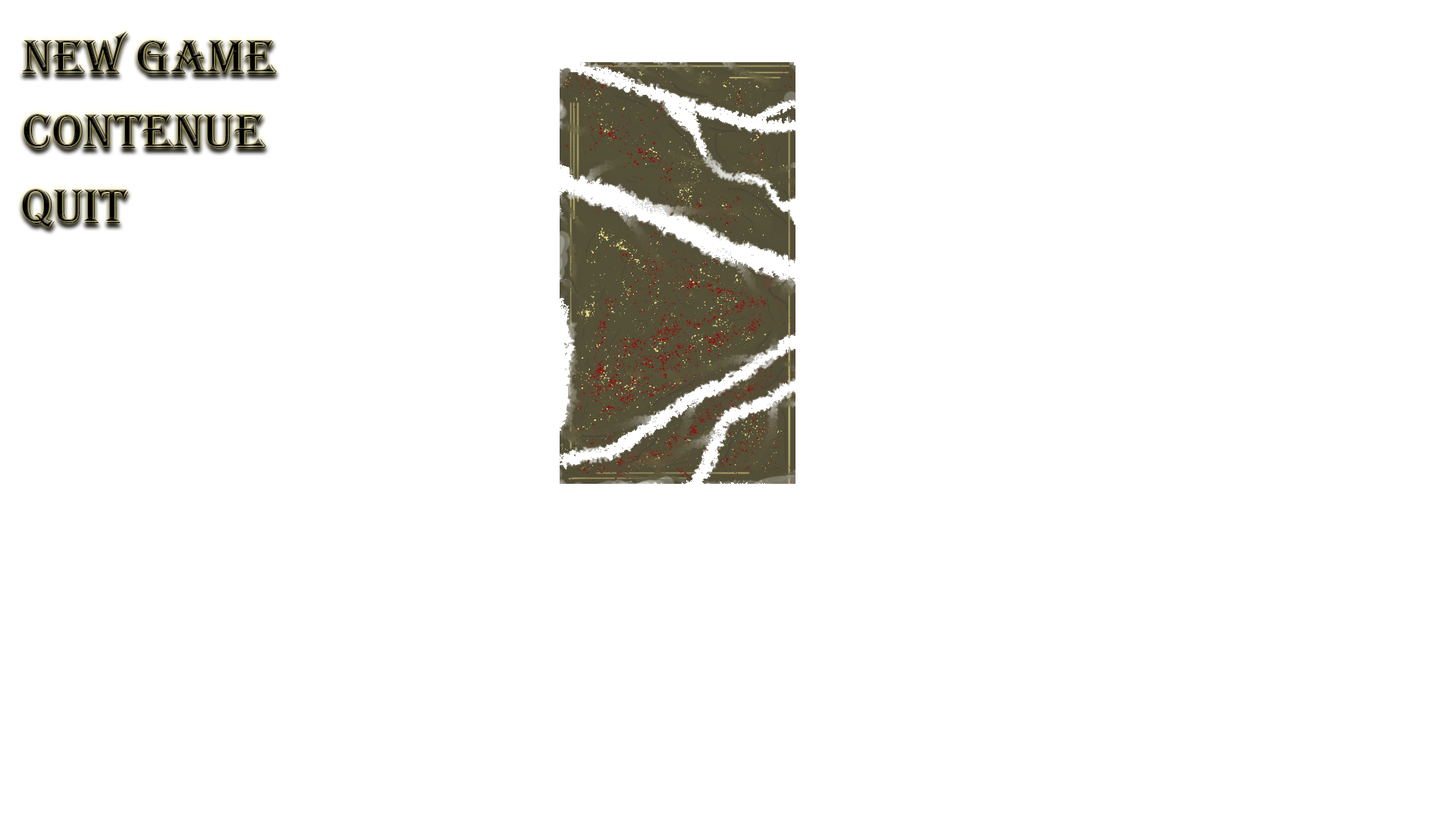
<style>
.page{position:relative;width:1456px;height:819px;background:#ffffff}
.page>*{position:absolute;margin:0}
.t1{font:50px "Algerian"}
.t2{font:50px "Algerian";color:#020201}
</style>
<div class="page">
<p class="t1" style="left:23px;top:31px;width:254px;height:43px">New Game</p>
<p class="t1" style="left:24px;top:114px;width:242px;height:35px">Contenue</p>
<p class="t2" style="left:22px;top:189px;width:107px;height:39px">Quit</p>
</div>
